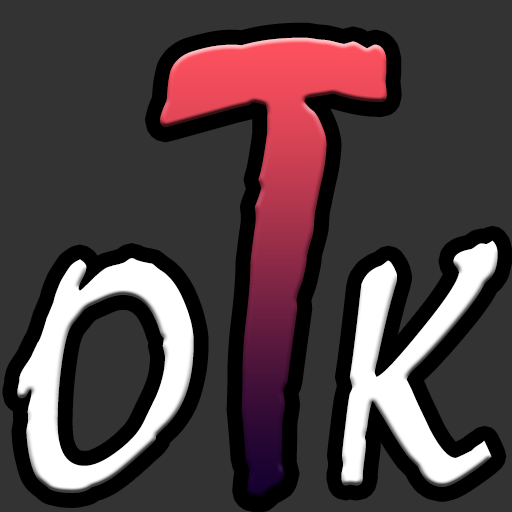
<style>
.page{position:relative;width:512px;height:512px;background:#333333}
.page>*{position:absolute;margin:0}
.t1{font:649px "Mistral"}
.t2{font:354px "Mistral";color:#ffffff}
</style>
<div class="page">
<p class="t1" style="left:160px;top:37px;width:227px;height:461px">T</p>
<p class="t2" style="left:341px;top:240px;width:157px;height:247px">K</p>
<p class="t2" style="left:17px;top:258px;width:177px;height:235px">O</p>
</div>
